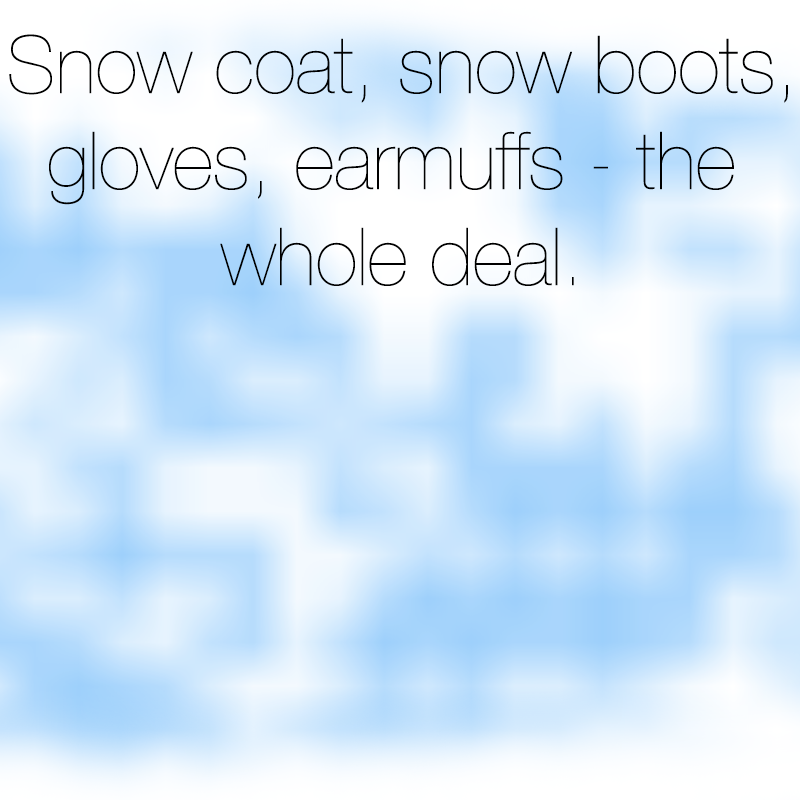
<style>
.page{position:relative;width:800px;height:800px}
.page>*{position:absolute;margin:0}
.t1{font:80px "HelveticaNeue-UltraLight";color:#000000}
</style>
<div class="page">
<p class="t1" style="left:9px;top:34px;width:779px;height:252px;text-align:center">Snow coat, snow boots,<br>gloves, earmuffs - the <br>whole deal.</p>
</div>
